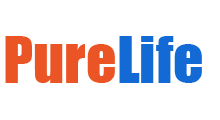
<style>
.page{position:relative;width:220px;height:120px;background:#ffffff}
.page>*{position:absolute;margin:0}
.t1{font:60px "Impact";color:#eb5424}
.t2{font:60px "Impact";color:#136ad5}
</style>
<div class="page">
<p class="t1" style="left:5px;top:36px;width:197px;height:47px">Pure<span class="t2">Life</span></p>
</div>
